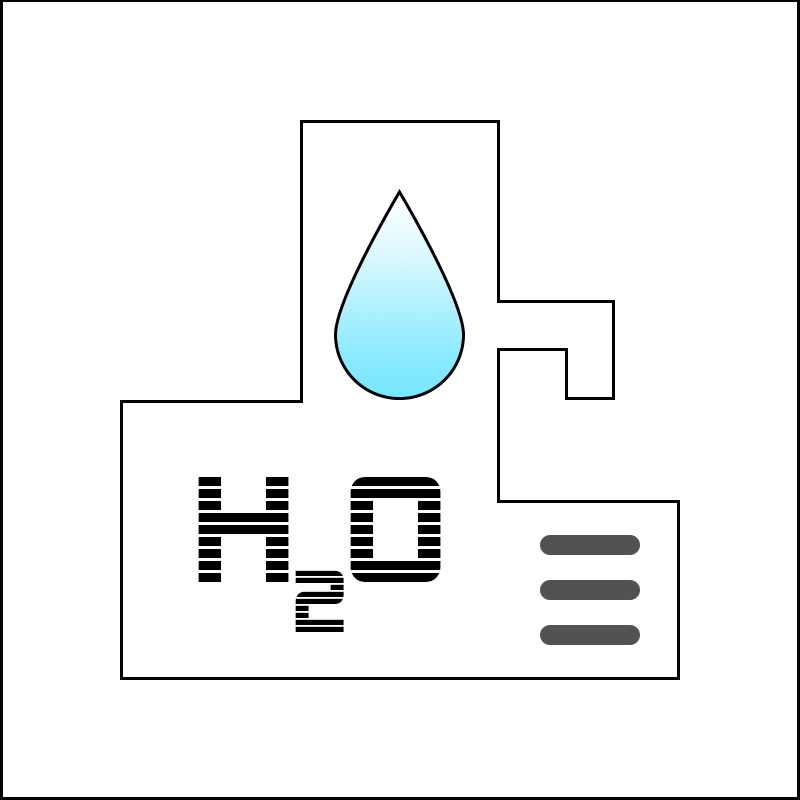
<style>
.page{position:relative;width:800px;height:800px;background:#ffffff}
.page>*{position:absolute;margin:0}
.t1{font:150px "AlienEncounters";color:#000000}
</style>
<div class="page">
<p class="t1" style="left:198px;top:477px;width:243px;height:155px">H2O</p>
</div>
